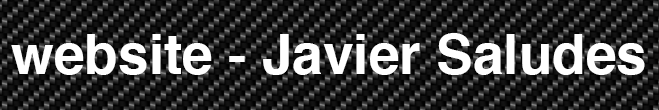
<style>
.page{position:relative;width:659px;height:110px}
.page>*{position:absolute;margin:0}
.t1{font:55px "Helvetica-Bold";color:#ffffff}
</style>
<div class="page">
<p class="t1" style="left:11px;top:33px;width:634px;height:42px">website - Javier Saludes</p>
</div>
